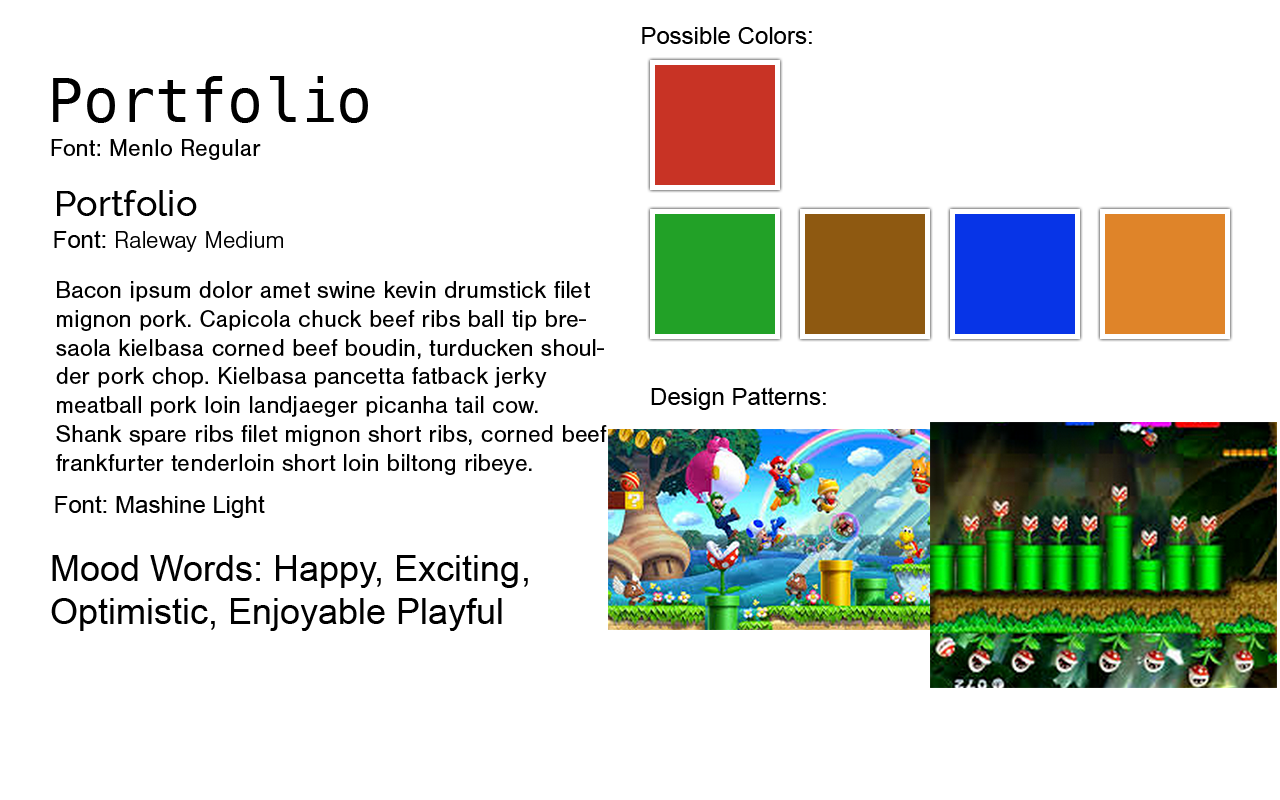
<style>
.page{position:relative;width:1280px;height:800px;background:#ffffff}
.page>*{position:absolute;margin:0}
.t1{font:24px "ArialMT";color:#000000}
.t2{font:60px "Menlo-Regular";color:#000000}
.t3{font:24px "NimbusSan-Reg";color:#000000}
.t4{font:36px "Raleway-Medium";color:#000000}
.t5{font:24px "NimbusSan-Lig";color:#000000}
.t6{font:36px "ArialMT";color:#000000}
</style>
<div class="page">
<p class="t1" style="left:642px;top:27px;width:170px;height:17px">Possible Colors:</p>
<p class="t2" style="left:53px;top:76px;width:315px;height:47px">Portfolio</p>
<p class="t3" style="left:51px;top:139px;width:210px;height:21px">Font: Menlo Regular</p>
<p class="t4" style="left:57px;top:190px;width:140px;height:26px">Portfolio</p>
<p class="t5" style="left:54px;top:230px;width:229px;height:22px"><span class="t1">Font: </span>Raleway Medium</p>
<p class="t3" style="left:56px;top:281px;width:551px;height:194px">Bacon ipsum dolor amet swine kevin drumstick filet mignon pork. Capicola chuck beef ribs ball tip bresaola kielbasa corned beef boudin, turducken shoulder pork chop. Kielbasa pancetta fatback jerky meatball pork loin landjaeger picanha tail cow. Shank spare ribs filet mignon short ribs, corned beef frankfurter tenderloin short loin biltong ribeye.</p>
<p class="t1" style="left:651px;top:387px;width:175px;height:23px">Design Patterns:</p>
<p class="t1" style="left:55px;top:495px;width:210px;height:23px">Font: Mashine Light</p>
<p class="t6" style="left:51px;top:555px;width:477px;height:76px">Mood Words: Happy, Exciting, Optimistic, Enjoyable Playful</p>
</div>
